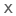
<style>
.page{position:relative;width:16px;height:16px;background:#ffffff}
.page>*{position:absolute;margin:0}
.t1{font:14px "Gautami";letter-spacing:-0.05em;color:#595959}
</style>
<div class="page">
<p class="t1" style="left:4px;top:4px;width:9px;height:9px">X</p>
</div>
